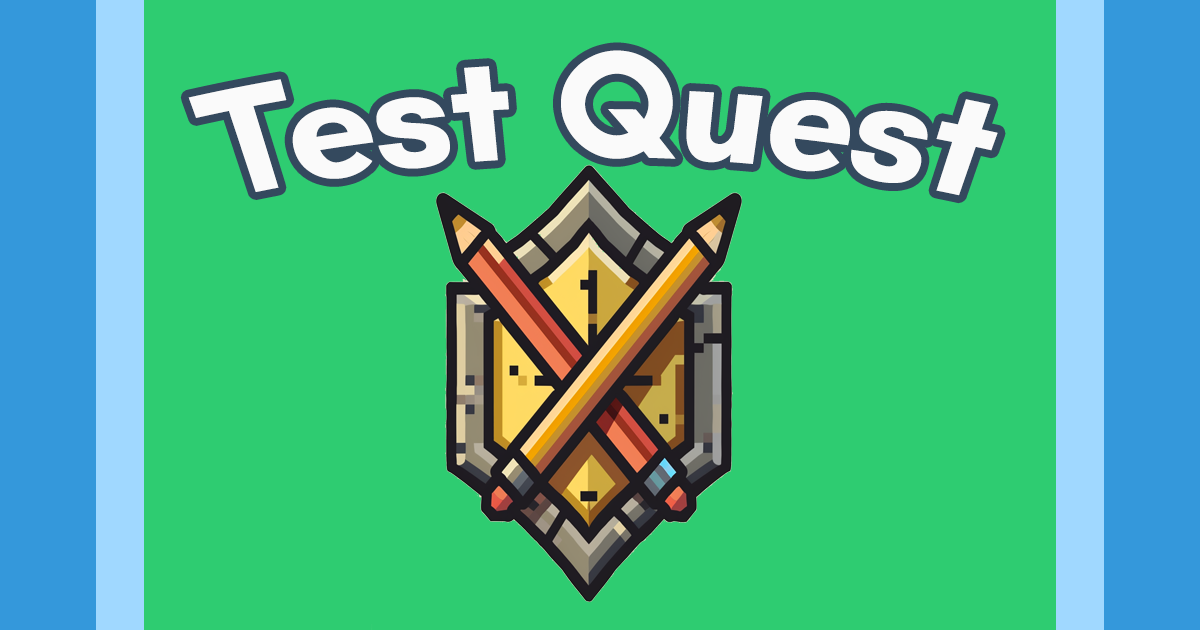
<style>
.page{position:relative;width:1200px;height:630px;background:#2ecc71}
.page>*{position:absolute;margin:0}
.t1{font:148px "Teachers-Bold";color:#fafafa}
</style>
<div class="page">
<p class="t1" style="left:188px;top:50px;width:810px;height:146px">Test Quest</p>
</div>
